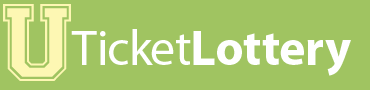
<style>
.page{position:relative;width:370px;height:90px;background:#a0c461}
.page>*{position:absolute;margin:0}
.t1{font:110px "Varsity-Regular";color:#fdf7b3}
.t2{font:50px "MyriadPro-Bold";color:#ffffff}
.t3{font:50px "MyriadPro-Regular";color:#ffffff}
</style>
<div class="page">
<p class="t1" style="left:3px;top:4px;width:68px;height:77px">U</p>
<p class="t2" style="left:71px;top:29px;width:280px;height:47px"><span class="t3">Ticket</span>Lottery</p>
</div>
